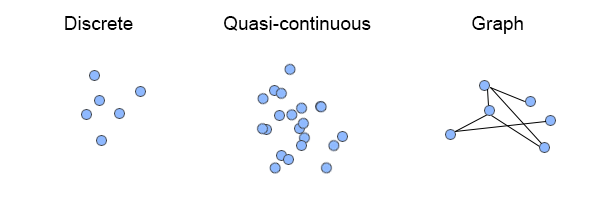
<style>
.page{position:relative;width:600px;height:206px;background:#ffffff}
.page>*{position:absolute;margin:0}
.t1{font:19px "ArialMT";color:#000000}
</style>
<div class="page">
<p class="t1" style="left:65px;top:16px;width:458px;height:18px">Discrete                 Quasi-continuous                   Graph</p>
</div>
